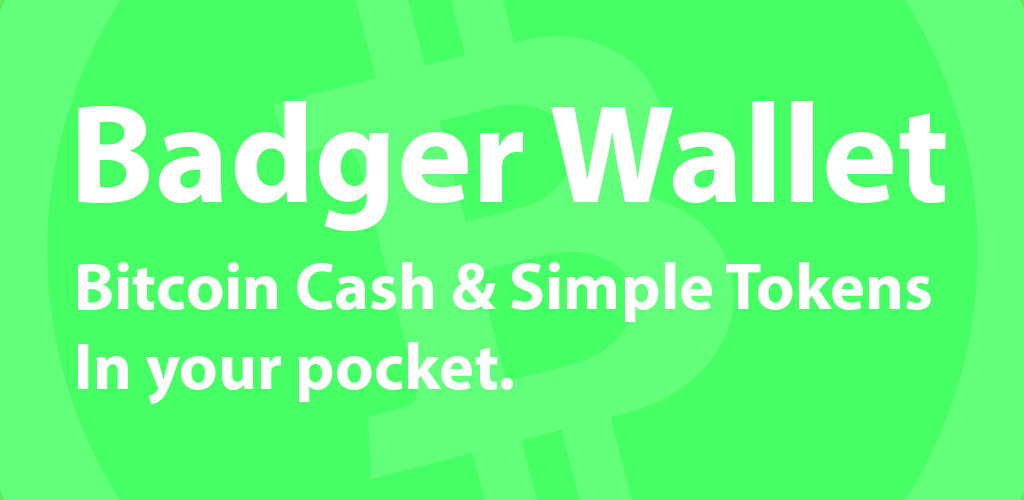
<style>
.page{position:relative;width:1024px;height:500px;background:#46ff64}
.page>*{position:absolute;margin:0}
.t1{font:141.7px "MyriadPro-Bold";color:#ffffff}
.t2{font:66.7px "MyriadPro-Bold";color:#ffffff}
</style>
<div class="page">
<p class="t1" style="left:78px;top:101px;width:868px;height:130px">Badger Wallet</p>
<p class="t2" style="left:78px;top:262px;width:853px;height:143px">Bitcoin Cash &amp; Simple Tokens  <br>In your pocket.</p>
</div>
